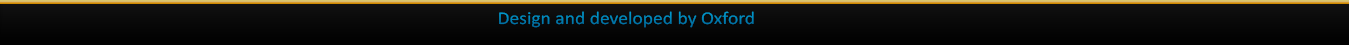
<style>
.page{position:relative;width:1349px;height:45px}
.page>*{position:absolute;margin:0}
.t1{font:18px "Calibri";color:#0082b5;scale:1.09 1}
</style>
<div class="page">
<p class="t1" style="left:499px;top:11px;width:255px;height:17px">Design and developed by Oxford</p>
</div>
